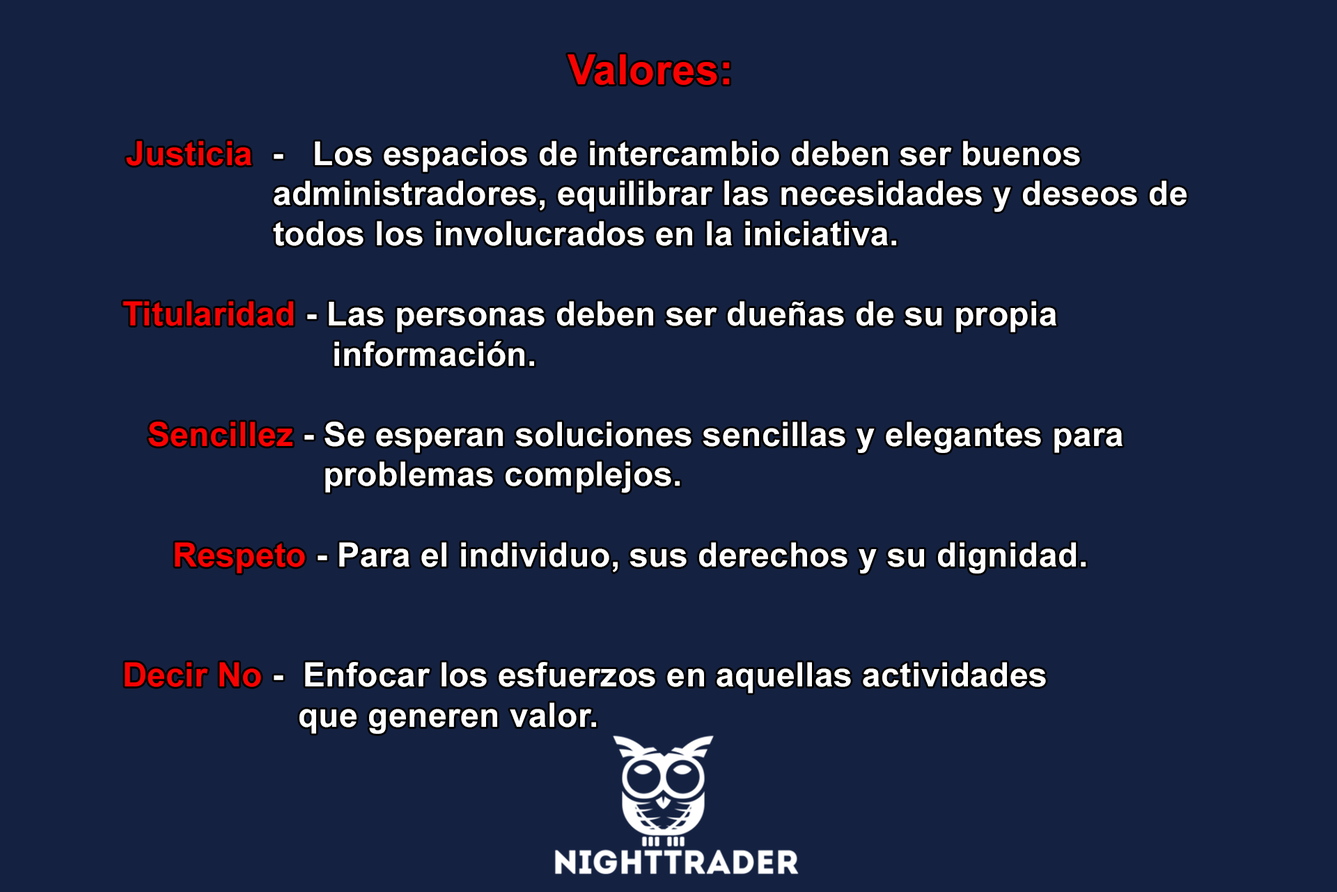
<style>
.page{position:relative;width:1337px;height:892px;background:#142141}
.page>*{position:absolute;margin:0}
.t1{font:33.4px "Arial-BoldMT";letter-spacing:0.01em;color:#ffffff}
.t2{font:41.8px "Arial-BoldMT";letter-spacing:0.01em;color:#f70202}
.t3{font:33.4px "Arial-BoldMT";letter-spacing:0.01em;color:#f70202}
</style>
<div class="page">
<p class="t1" style="left:123px;top:54px;width:1064px;height:679px;text-align:center"><span class="t2">Valores:<br><br></span><span class="t3">   Justicia </span> -   Los espacios de intercambio deben ser buenos <br>       administradores, equilibrar las necesidades y deseos de <br>       todos los involucrados en la iniciativa. <br><br> <span class="t3">Titularidad </span>- Las personas deben ser dueñas de su propia<br>          información.<br><br>  <span class="t3">Sencillez </span>- Se esperan soluciones sencillas y elegantes para <br>         problemas complejos.<br><br>   <span class="t3">Respeto </span>- Para el individuo, sus derechos y su dignidad.<br><br><br> <span class="t3">Decir No</span> -  Enfocar los esfuerzos en aquellas actividades<br>        que generen valor.</p>
</div>
